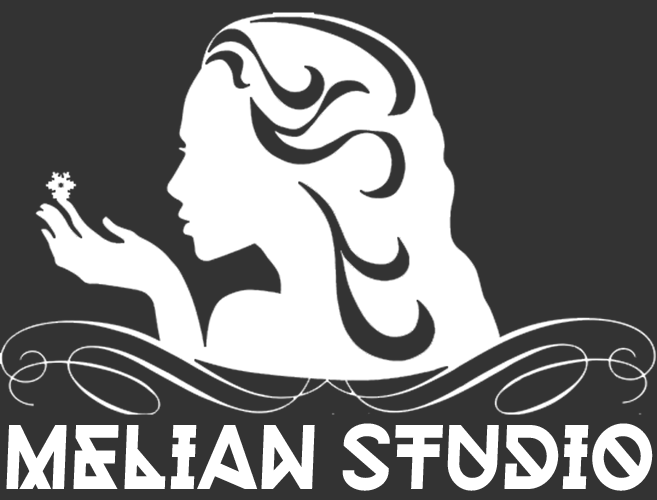
<style>
.page{position:relative;width:657px;height:500px;background:#333333}
.page>*{position:absolute;margin:0}
.t1{font:83px "Kontanter-Bold";color:#ffffff;scale:0.9 1}
</style>
<div class="page">
<p class="t1" style="left:6px;top:423px;width:647px;height:68px">MELIAN STUDIO</p>
</div>
